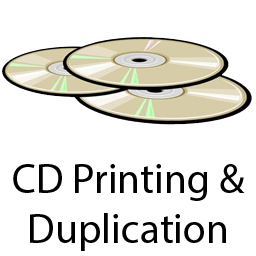
<style>
.page{position:relative;width:256px;height:256px;background:#ffffff}
.page>*{position:absolute;margin:0}
.t1{font:41.7px "MyriadPro-Regular";color:#000000}
</style>
<div class="page">
<p class="t1" style="left:13px;top:164px;width:232px;height:87px;text-align:center">CD Printing &amp;<br>Duplication</p>
</div>
